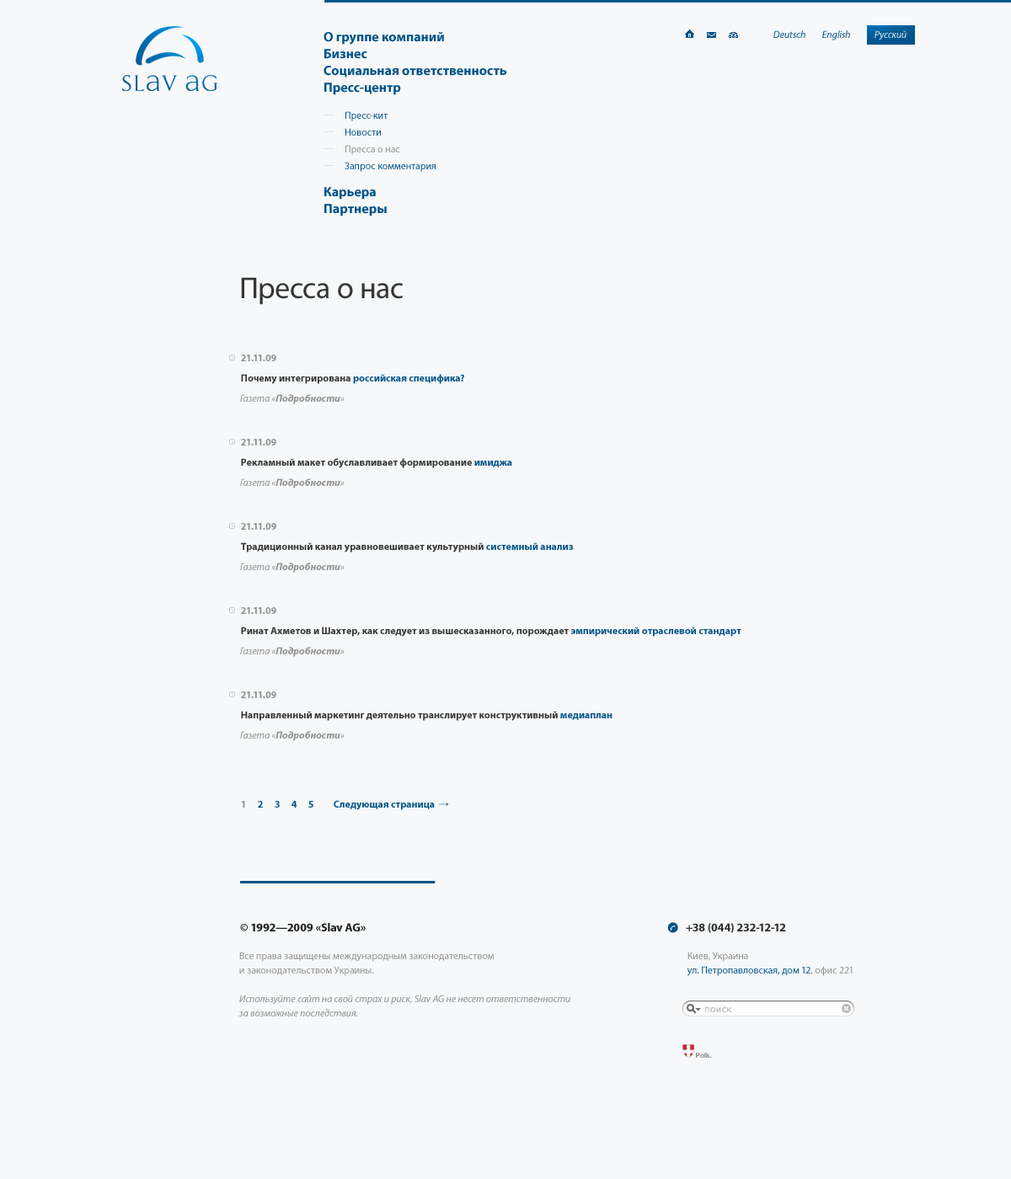
<style>
.page{position:relative;width:1011px;height:1179px;background:#f6f8f9}
.page>*{position:absolute;margin:0}
.t1{font:13.5px "MyriadPro-Bold";color:#005288}
.t2{font:10.1px "MyriadPro-It";color:#005288}
.t3{font:10.1px "MyriadPro-It";color:#eaeef1}
.t4{font:10.1px "MyriadPro-Regular";color:#005288}
.t5{font:10.1px "MyriadPro-Regular";color:#8e8e8e}
.t6{font:30.3px "MyriadPro-Regular";color:#343534}
.t7{font:10.1px "MyriadPro-Bold";color:#8e8e8e}
.t8{font:10.1px "MyriadPro-Bold";color:#005288}
.t9{font:10.1px "MyriadPro-Bold";color:#343534}
.t10{font:10.1px "MyriadPro-BoldIt";color:#8e8e8e}
.t11{font:10.1px "MyriadPro-It";color:#8e8e8e}
.t12{font:10.1px "ArialMT"}
.t13{font:11.8px "MyriadPro-Bold";color:#212121}
.t14{font:11.8px "MyriadPro-Bold";color:#303030}
.t15{font:10.1px/14.3px "MyriadPro-It";color:#8e8e8e}
.t16{font:10.1px/14.3px "MyriadPro-Regular";color:#8e8e8e}
.t17{font:10.1px/14.3px "MyriadPro-Regular";color:#005288}
.t18{font:6.7px "HelveticaNeue-Bold";color:#8a8a8a}
</style>
<div class="page">
<p class="t1" style="left:324px;top:32px;width:120px;height:13px">О группе компаний</p>
<p class="t2" style="left:773px;top:30px;width:32px;height:8px">Deutsch</p>
<p class="t2" style="left:822px;top:30px;width:28px;height:10px">English</p>
<p class="t3" style="left:874px;top:30px;width:33px;height:10px">Русский</p>
<p class="t1" style="left:324px;top:49px;width:43px;height:10px">Бизнес</p>
<p class="t1" style="left:324px;top:66px;width:183px;height:12px">Социальная ответственность</p>
<p class="t1" style="left:324px;top:83px;width:77px;height:12px">Пресс-центр</p>
<p class="t4" style="left:345px;top:111px;width:43px;height:10px">Пресс-кит</p>
<p class="t4" style="left:345px;top:128px;width:36px;height:8px">Новости</p>
<p class="t5" style="left:345px;top:145px;width:55px;height:10px">Пресса о нас</p>
<p class="t4" style="left:345px;top:162px;width:91px;height:10px">Запрос комментария</p>
<p class="t1" style="left:324px;top:187px;width:52px;height:13px">Карьера</p>
<p class="t1" style="left:324px;top:204px;width:63px;height:13px">Партнеры</p>
<p class="t6" style="left:241px;top:277px;width:162px;height:28px">Пресса о нас</p>
<p class="t7" style="left:241px;top:355px;width:35px;height:6px">21.11.09</p>
<p class="t8" style="left:241px;top:374px;width:223px;height:10px"><span class="t9">Почему интегрирована </span>российская специфика?</p>
<p class="t10" style="left:240px;top:394px;width:105px;height:10px"><span class="t11">Газета «</span>Подробности<span class="t11">»</span></p>
<p class="t7" style="left:241px;top:439px;width:35px;height:7px">21.11.09</p>
<p class="t9" style="left:241px;top:458px;width:271px;height:10px">Рекламный макет обуславливает формирование <span class="t8">имиджа</span></p>
<p class="t10" style="left:240px;top:479px;width:105px;height:10px"><span class="t11">Газета «</span>Подробности<span class="t11">»</span></p>
<p class="t7" style="left:241px;top:523px;width:35px;height:7px">21.11.09</p>
<p class="t9" style="left:241px;top:543px;width:333px;height:10px">Традиционный канал уравновешивает культурный <span class="t8">системный анализ</span></p>
<p class="t10" style="left:240px;top:563px;width:105px;height:10px"><span class="t11">Газета «</span>Подробности<span class="t11">»</span></p>
<p class="t7" style="left:241px;top:607px;width:35px;height:7px">21.11.09</p>
<p class="t9" style="left:241px;top:627px;width:500px;height:10px">Ринат Ахметов и Шахтер, как следует из вышесказанного, порождает <span class="t8">эмпирический отраслевой стандарт</span></p>
<p class="t10" style="left:240px;top:647px;width:105px;height:10px"><span class="t11">Газета «</span>Подробности<span class="t11">»</span></p>
<p class="t7" style="left:241px;top:692px;width:35px;height:6px">21.11.09</p>
<p class="t9" style="left:241px;top:711px;width:371px;height:10px">Направленный маркетинг деятельно транслирует конструктивный <span class="t8">медиаплан</span></p>
<p class="t10" style="left:240px;top:731px;width:105px;height:10px"><span class="t11">Газета «</span>Подробности<span class="t11">»</span></p>
<p class="t7" style="left:241px;top:801px;width:4px;height:7px">1</p>
<p class="t8" style="left:258px;top:801px;width:5px;height:7px">2</p>
<p class="t8" style="left:275px;top:801px;width:5px;height:7px">3</p>
<p class="t8" style="left:291px;top:801px;width:6px;height:7px">4</p>
<p class="t8" style="left:308px;top:801px;width:5px;height:7px">5</p>
<p class="t8" style="left:334px;top:800px;width:101px;height:10px">Следующая страница</p>
<p class="t12" style="left:439px;top:802px;width:10px;height:4px">→</p>
<p class="t13" style="left:240px;top:923px;width:126px;height:9px">© 1992—2009 «Slav AG»</p>
<p class="t14" style="left:686px;top:923px;width:100px;height:10px">+38 (044) 232-12-12</p>
<p class="t15" style="left:238px;top:952px;width:332px;height:65px"><span class="t16">Все права защищены международным законодательством<br>и законодательством Украины.<br><br></span>Используйте сайт на свой страх и риск, Slav AG не несет ответственности<br>за возможные последствия.</p>
<p class="t17" style="left:687px;top:952px;width:166px;height:24px"><span class="t16">Киев, Украина<br></span>ул. Петропавловская, дом 12<span class="t16">, офис 221</span></p>
<p class="t18" style="left:696px;top:1053px;width:16px;height:5px">Polk.</p>
</div>
